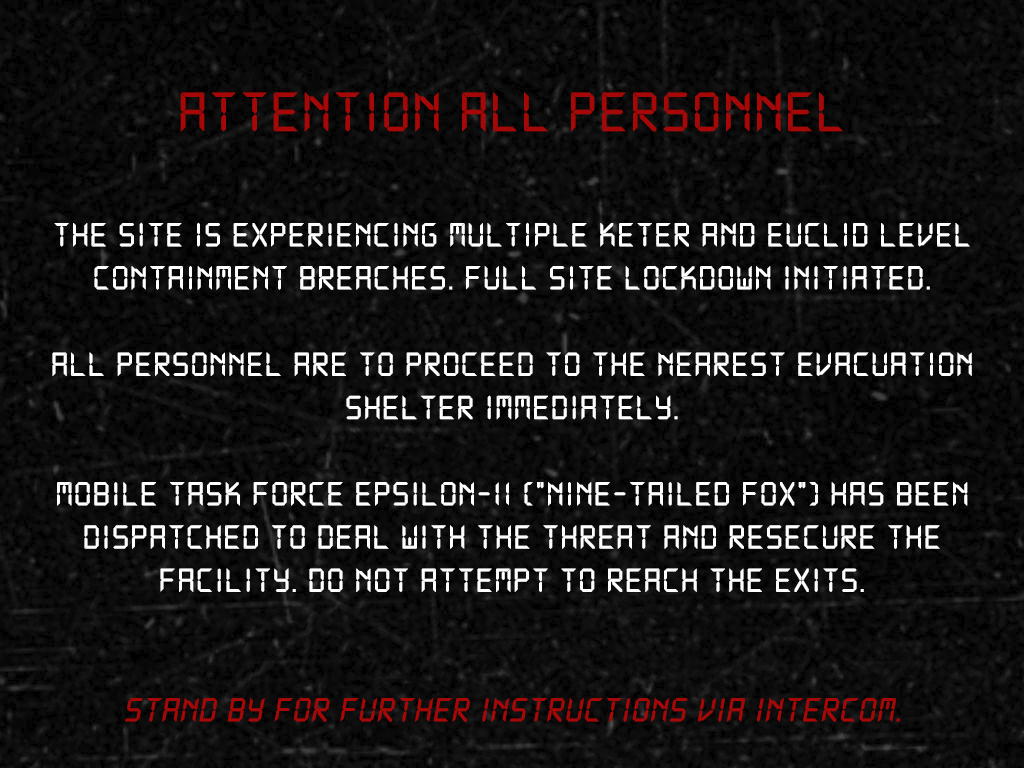
<style>
.page{position:relative;width:1024px;height:768px}
.page>*{position:absolute;margin:0}
.t1{font:60px "DS-Digital";color:#a60808;font-weight:bold}
.t2{font:36px "DS-Digital";color:#ffffff;font-weight:bold}
.t3{font:36px "Impact";color:#ffffff;font-weight:bold}
.t4{font:36px "DS-Digital";color:#a60808;font-weight:bold;font-style:italic}
</style>
<div class="page">
<p class="t1" style="left:180px;top:92px;width:663px;height:40px">ATTENTION ALL PERSONNEL</p>
<p class="t2" style="left:52px;top:222px;width:920px;height:500px;text-align:center"><span class="t3"><br></span>THE SITE IS EXPERIENCING MULTIPLE KETER AND EUCLID LEVEL CONTAINMENT BREACHES. FULL SITE LOCKDOWN INITIATED.<br><br>ALL PERSONNEL ARE TO PROCEED TO THE NEAREST Evacuation SHELTER IMMEDIATELY.<br><br>Mobile Task Force Epsilon-11 ("Nine-Tailed Fox") has been dispatched to deal with the threat and resecure the facility. Do not attempt to reach the exits.<br><br><br><span class="t4">STAND BY FOR FURTHER INSTRUCTIONS VIA INTERCOM.</span></p>
</div>
